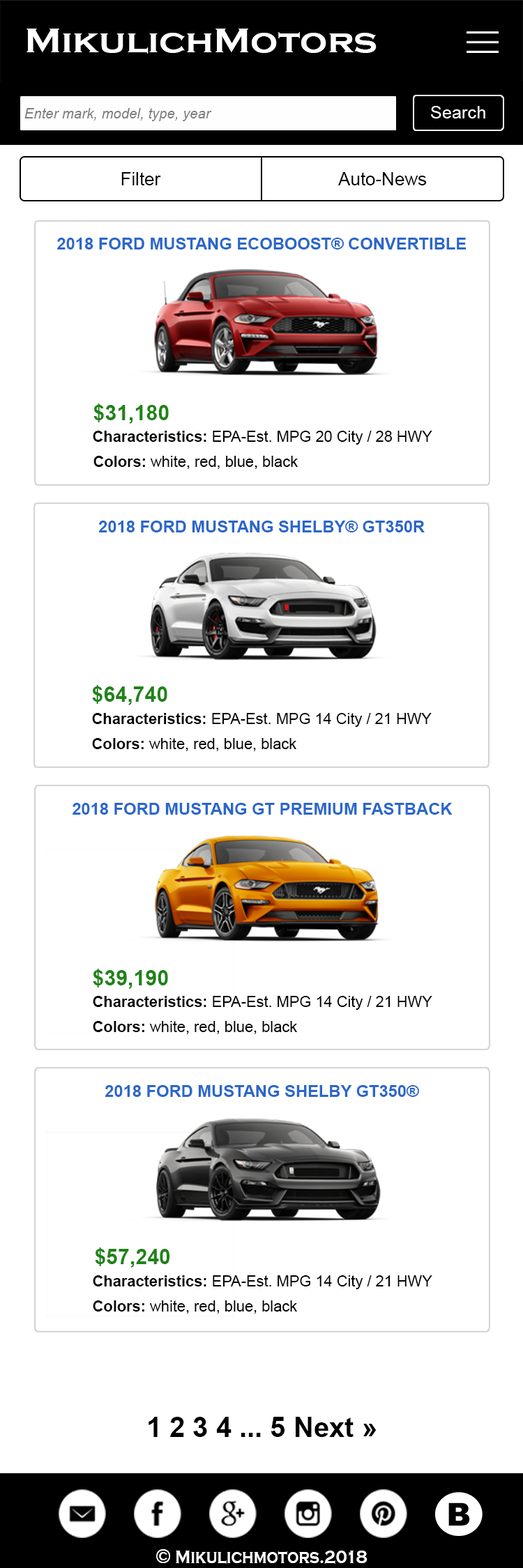
<style>
.page{position:relative;width:523px;height:1568px;background:#ffffff}
.page>*{position:absolute;margin:0}
.t1{font:34.8px "CopperplateGothic-Bold";color:#ffffff;scale:1.11 1}
.t2{font:14.1px "Arial-ItalicMT";color:#807e7e}
.t3{font:17.6px "ArialMT";color:#fffefe}
.t4{font:18.1px "ArialMT";color:#000000}
.t5{font:16.5px "Arial-BoldMT";color:#2a67cb}
.t6{font:21.2px "Arial-BoldMT";color:#1e8416}
.t7{font:15.2px "ArialMT";color:#000000}
.t8{font:15.2px "Arial-BoldMT";color:#000000}
.t9{font:27.9px "Arial-BoldMT";color:#000000}
.t10{font:19.2px "CopperplateGothic-Bold";color:#ffffff;scale:0.83 1}
.t11{font:20.9px "CopperplateGothic-Bold";color:#ffffff;scale:0.83 1}
</style>
<div class="page">
<p class="t1" style="left:26px;top:29px;width:350px;height:25px">MikulichMotors</p>
<p class="t2" style="left:24px;top:108px;width:188px;height:13px">Enter mark, model, type, year</p>
<p class="t3" style="left:431px;top:106px;width:54px;height:12px">Search</p>
<p class="t4" style="left:121px;top:172px;width:40px;height:13px">Filter</p>
<p class="t4" style="left:338px;top:172px;width:88px;height:13px">Auto-News</p>
<p class="t5" style="left:57px;top:238px;width:409px;height:11px">2018 FORD MUSTANG ECOBOOST® CONVERTIBLE</p>
<p class="t6" style="left:93px;top:403px;width:76px;height:21px">$31,180</p>
<p class="t7" style="left:93px;top:431px;width:339px;height:14px"><span class="t8">Characteristics: </span>EPA-Est. MPG 20 City / 28 HWY</p>
<p class="t7" style="left:93px;top:456px;width:205px;height:13px"><span class="t8">Colors:</span> white, red, blue, black</p>
<p class="t5" style="left:98px;top:521px;width:326px;height:11px">2018 FORD MUSTANG SHELBY® GT350R</p>
<p class="t6" style="left:92px;top:685px;width:75px;height:20px">$64,740</p>
<p class="t7" style="left:92px;top:713px;width:339px;height:14px"><span class="t8">Characteristics: </span>EPA-Est. MPG 14 City / 21 HWY</p>
<p class="t7" style="left:92px;top:738px;width:204px;height:13px"><span class="t8">Colors:</span> white, red, blue, black</p>
<p class="t5" style="left:72px;top:803px;width:380px;height:12px">2018 FORD MUSTANG GT PREMIUM FASTBACK</p>
<p class="t6" style="left:93px;top:969px;width:75px;height:20px">$39,190</p>
<p class="t7" style="left:93px;top:996px;width:339px;height:14px"><span class="t8">Characteristics: </span>EPA-Est. MPG 14 City / 21 HWY</p>
<p class="t7" style="left:93px;top:1021px;width:204px;height:13px"><span class="t8">Colors:</span> white, red, blue, black</p>
<p class="t5" style="left:105px;top:1085px;width:314px;height:12px">2018 FORD MUSTANG SHELBY GT350®</p>
<p class="t6" style="left:95px;top:1247px;width:75px;height:21px">$57,240</p>
<p class="t7" style="left:93px;top:1275px;width:339px;height:14px"><span class="t8">Characteristics: </span>EPA-Est. MPG 14 City / 21 HWY</p>
<p class="t7" style="left:93px;top:1300px;width:204px;height:14px"><span class="t8">Colors:</span> white, red, blue, black</p>
<p class="t9" style="left:148px;top:1417px;width:228px;height:20px">1 2 3 4 ... 5 Next »</p>
<p class="t10" style="left:156px;top:1549px;width:211px;height:15px"><span class="t11">©</span> Mikulichmotors.2018</p>
</div>
